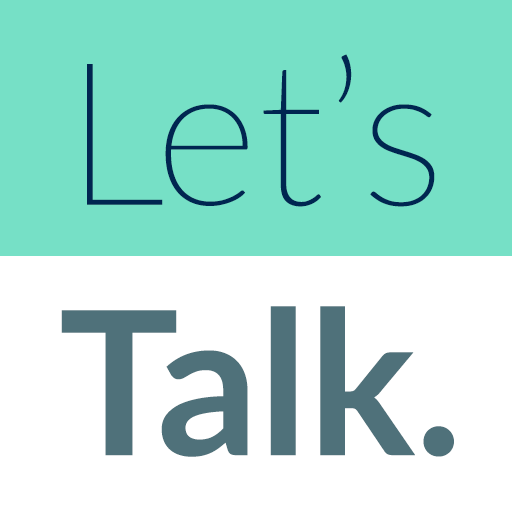
<style>
.page{position:relative;width:512px;height:512px;background:#76e0c6}
.page>*{position:absolute;margin:0}
.t1{font:200px "Lato-Thin";color:#002651}
.t2{font:200px "Lato-Bold";color:#4f717a}
</style>
<div class="page">
<p class="t1" style="left:87px;top:54px;width:348px;height:153px">Let’s</p>
<p class="t2" style="left:61px;top:306px;width:393px;height:151px">Talk.</p>
</div>
